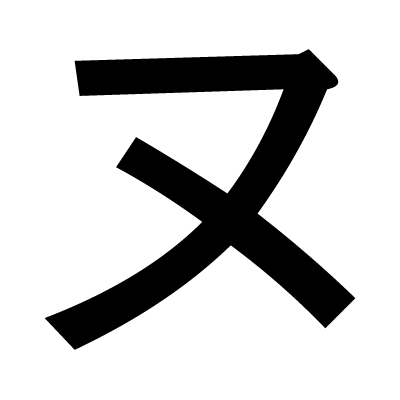
<style>
.page{position:relative;width:400px;height:400px;background:#ffffff}
.page>*{position:absolute;margin:0}
.t1{font:424.8px "MS-PGothic";color:#000000}
</style>
<div class="page">
<p class="t1" style="left:44px;top:49px;width:312px;height:301px">ヌ</p>
</div>
